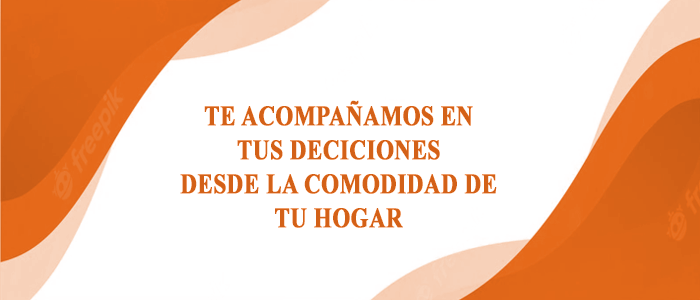
<style>
.page{position:relative;width:700px;height:300px;background:#ffffff}
.page>*{position:absolute;margin:0}
.t1{font:28.6px "TimesNewRomanPS-BoldMT";color:#d36118;font-weight:bold;scale:0.8 1}
</style>
<div class="page">
<p class="t1" style="left:180px;top:100px;width:317px;height:128px;text-align:center">TE ACOMPAÑAMOS EN<br>TUS DECICIONES<br>DESDE LA COMODIDAD DE<br>TU HOGAR</p>
</div>
